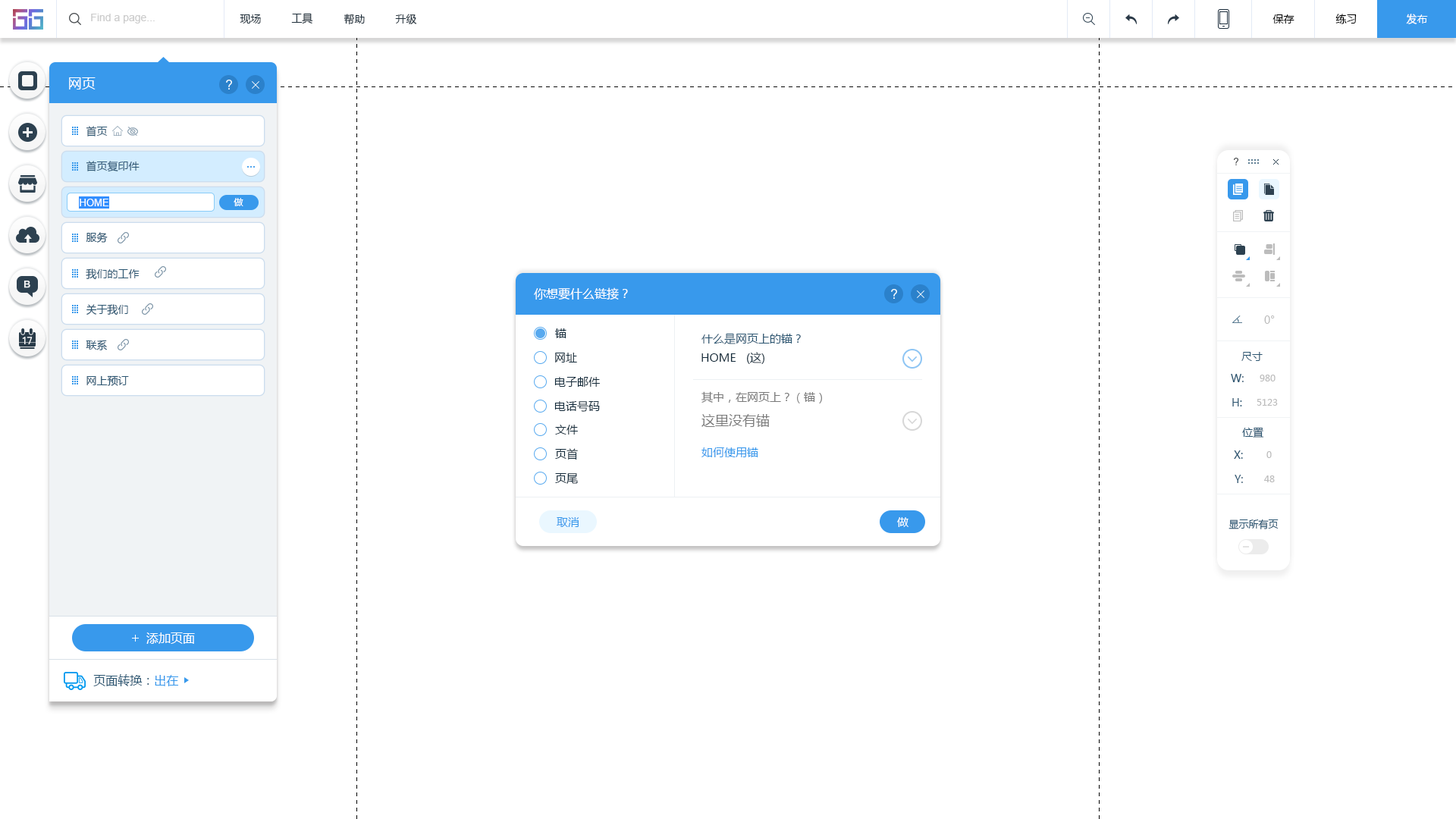
<style>
.page{position:relative;width:1456px;height:819px;background:#ffffff}
.page>*{position:absolute;margin:0}
.t1{font:10.6px "ArialMT";color:#cccccc}
.t2{font:10.6px "MicrosoftYaHei";color:#20303c}
.t3{font:10.6px "MicrosoftYaHei";color:#000000}
.t4{font:10.6px "MicrosoftYaHei";color:#ffffff}
.t5{font:13.6px "MicrosoftYaHei";color:#ffffff}
.t6{font:10.6px "MicrosoftYaHei";color:#2b5672}
.t7{font:9.1px "MicrosoftYaHei";color:#ffffff}
.t8{font:9.9px "ArialMT";color:#ffffff}
.t9{font:12.1px "MicrosoftYaHei";color:#ffffff}
.t10{font:10.6px "MicrosoftYaHei";color:#bcbcbc}
.t11{font:11.4px "MicrosoftYaHei";color:#162d3d}
.t12{font:11.4px "MicrosoftYaHei";color:#2b5672}
.t13{font:9.1px "MicrosoftYaHei";color:#bcbcbc}
.t14{font:11.4px "MicrosoftYaHei";color:#7a7a7a}
.t15{font:13.6px "MicrosoftYaHei";color:#7a7a7a}
.t16{font:11.4px "MicrosoftYaHei";color:#3899ec}
.t17{font:11.4px "MicrosoftYaHei";color:#ffffff}
.t18{font:9.9px "MicrosoftYaHei";color:#2b5672}
.t19{font:9.1px "MicrosoftYaHei";color:#2b5672}
.t20{font:9.1px "MicrosoftYaHei";color:#3899ec}
</style>
<div class="page">
<p class="t1" style="left:91px;top:14px;width:64px;height:10px">Find a page...</p>
<p class="t2" style="left:240px;top:14px;width:21px;height:10px">现场</p>
<p class="t2" style="left:291px;top:13px;width:22px;height:11px">工具</p>
<p class="t2" style="left:344px;top:14px;width:21px;height:11px">帮助</p>
<p class="t2" style="left:395px;top:14px;width:22px;height:10px">升级</p>
<p class="t3" style="left:1272px;top:14px;width:22px;height:10px">保存</p>
<p class="t3" style="left:1335px;top:14px;width:22px;height:10px">练习</p>
<p class="t4" style="left:1406px;top:14px;width:22px;height:10px">发布</p>
<p class="t5" style="left:69px;top:77px;width:27px;height:12px">网页</p>
<p class="t6" style="left:86px;top:126px;width:22px;height:10px">首页</p>
<p class="t6" style="left:86px;top:161px;width:54px;height:11px">首页复印件</p>
<p class="t7" style="left:234px;top:198px;width:9px;height:8px">做</p>
<p class="t8" style="left:80px;top:199px;width:29px;height:7px">HOME</p>
<p class="t6" style="left:86px;top:232px;width:22px;height:11px">服务</p>
<p class="t6" style="left:86px;top:268px;width:54px;height:12px">我们的工作</p>
<p class="t9" style="left:534px;top:287px;width:94px;height:13px">你想要什么链接？</p>
<p class="t6" style="left:86px;top:304px;width:42px;height:11px">关于我们</p>
<p class="t10" style="left:1264px;top:315px;width:11px;height:9px">0°</p>
<p class="t11" style="left:555px;top:328px;width:11px;height:10px">锚</p>
<p class="t6" style="left:86px;top:340px;width:21px;height:10px">联系</p>
<p class="t12" style="left:701px;top:333px;width:100px;height:11px">什么是网页上的锚？</p>
<p class="t11" style="left:555px;top:353px;width:22px;height:9px">网址</p>
<p class="t11" style="left:701px;top:352px;width:63px;height:12px">HOME   (这)</p>
<p class="t6" style="left:1241px;top:352px;width:22px;height:9px">尺寸</p>
<p class="t6" style="left:86px;top:375px;width:43px;height:11px">网上预订</p>
<p class="t11" style="left:554px;top:377px;width:46px;height:10px">电子邮件</p>
<p class="t6" style="left:1231px;top:374px;width:13px;height:8px">W:</p>
<p class="t13" style="left:1260px;top:375px;width:15px;height:6px">980</p>
<p class="t11" style="left:554px;top:401px;width:46px;height:11px">电话号码</p>
<p class="t14" style="left:701px;top:391px;width:121px;height:12px">其中，在网页上？（锚）</p>
<p class="t6" style="left:1232px;top:398px;width:10px;height:8px">H:</p>
<p class="t13" style="left:1257px;top:399px;width:21px;height:7px">5123</p>
<p class="t11" style="left:555px;top:425px;width:23px;height:10px">文件</p>
<p class="t15" style="left:701px;top:414px;width:69px;height:13px">这里没有锚</p>
<p class="t6" style="left:1242px;top:427px;width:22px;height:11px">位置</p>
<p class="t11" style="left:555px;top:448px;width:23px;height:12px">页首</p>
<p class="t16" style="left:701px;top:447px;width:57px;height:10px">如何使用锚</p>
<p class="t6" style="left:1234px;top:450px;width:9px;height:9px">X:</p>
<p class="t13" style="left:1266px;top:451px;width:6px;height:7px">0</p>
<p class="t11" style="left:555px;top:473px;width:23px;height:11px">页尾</p>
<p class="t6" style="left:1235px;top:475px;width:8px;height:8px">Y:</p>
<p class="t13" style="left:1264px;top:475px;width:11px;height:7px">48</p>
<p class="t16" style="left:557px;top:517px;width:22px;height:10px">取消</p>
<p class="t17" style="left:897px;top:517px;width:11px;height:10px">做</p>
<p class="t18" style="left:1228px;top:519px;width:51px;height:10px">显示所有页</p>
<p class="t9" style="left:146px;top:632px;width:49px;height:12px">添加页面</p>
<p class="t19" style="left:93px;top:674px;width:86px;height:12px">页面转换：<span class="t20">出在</span></p>
</div>
